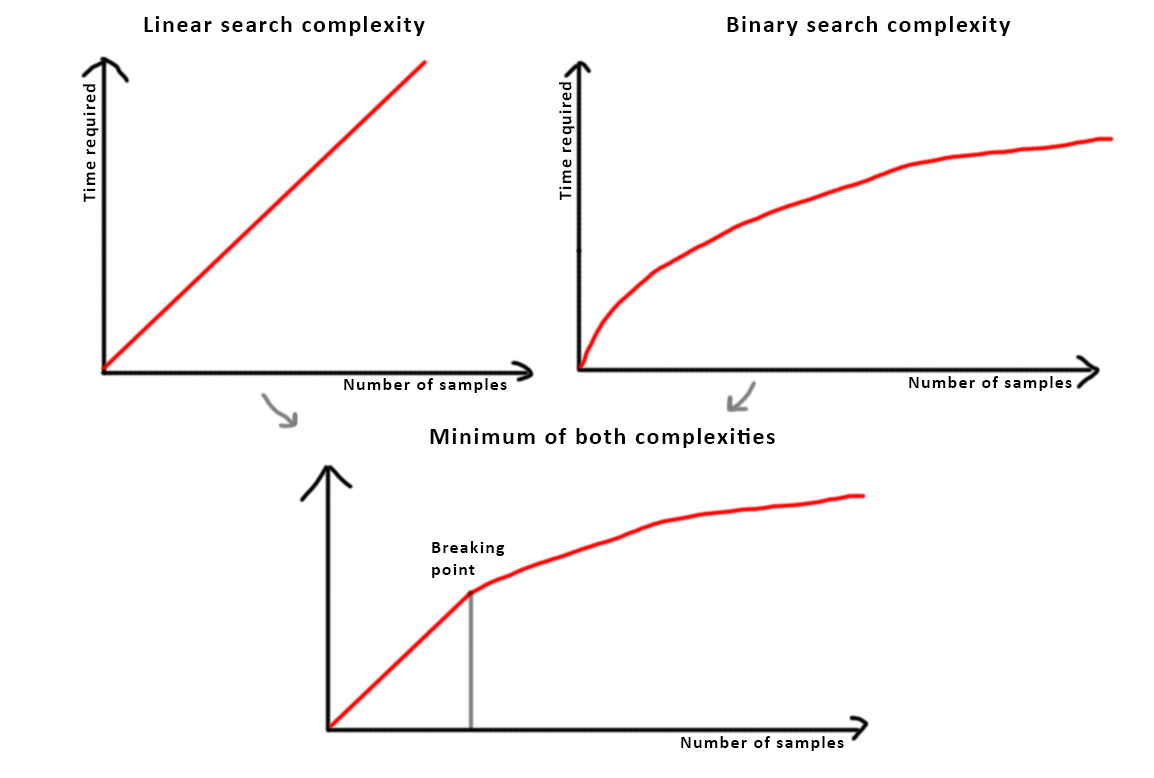
<style>
.page{position:relative;width:1154px;height:778px;background:#ffffff}
.page>*{position:absolute;margin:0}
.t1{font:24px "Calibri-Bold";letter-spacing:0.064em;color:#000000}
.t2{font:18px "Calibri-Bold";letter-spacing:0.064em;color:#000000}
</style>
<div class="page">
<p class="t1" style="left:144px;top:16px;width:281px;height:20px">Linear search complexity</p>
<p class="t1" style="left:727px;top:16px;width:284px;height:20px">Binary search complexity</p>
<p class="t2" style="left:83px;top:84px;width:16px;height:118px;rotate:-90deg">Time required</p>
<p class="t2" style="left:559px;top:82px;width:16px;height:118px;rotate:-90deg">Time required</p>
<p class="t2" style="left:909px;top:376px;width:163px;height:15px">Number of samples</p>
<p class="t2" style="left:344px;top:378px;width:163px;height:15px">Number of samples</p>
<p class="t1" style="left:430px;top:428px;width:345px;height:20px">Minimum of both complexities</p>
<p class="t2" style="left:432px;top:541px;width:73px;height:37px">Breaking<br>point</p>
<p class="t2" style="left:681px;top:736px;width:163px;height:15px">Number of samples</p>
</div>
